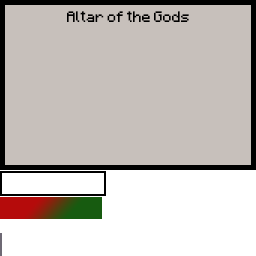
<style>
.page{position:relative;width:256px;height:256px;background:#c7c0bb}
.page>*{position:absolute;margin:0}
.t1{font:12px "Minecraft";color:#000000}
</style>
<div class="page">
<p class="t1" style="left:67px;top:11px;width:122px;height:11px">Altar of the Gods</p>
</div>
